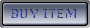
<style>
.page{position:relative;width:90px;height:28px}
.page>*{position:absolute;margin:0}
.t1{font:13.3px "Tahoma-Bold"}
</style>
<div class="page">
<p class="t1" style="left:11px;top:9px;width:65px;height:9px">BUY ITEM</p>
</div>
